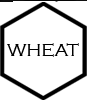
<style>
.page{position:relative;width:87px;height:100px;background:#ffffff}
.page>*{position:absolute;margin:0}
.t1{font:18.2px "CopperplateGothic-Light"}
</style>
<div class="page">
<p class="t1" style="left:7px;top:42px;width:72px;height:14px">WHEAT</p>
</div>
